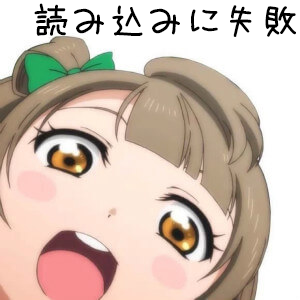
<style>
.page{position:relative;width:300px;height:300px;background:#ffffff}
.page>*{position:absolute;margin:0}
.t1{font:38px "aquafont";color:#000000}
</style>
<div class="page">
<p class="t1" style="left:34px;top:3px;width:262px;height:34px">読み込みに失敗</p>
</div>
